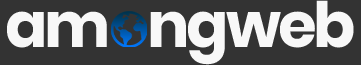
<style>
.page{position:relative;width:361px;height:65px;background:#333333}
.page>*{position:absolute;margin:0}
.t1{font:62.6px "Poppins-Bold";letter-spacing:-0.05em;color:#f8f8f8}
</style>
<div class="page">
<p class="t1" style="left:150px;top:0px;width:204px;height:65px">ngweb</p>
<p class="t1" style="left:7px;top:11px;width:100px;height:37px">am</p>
</div>
